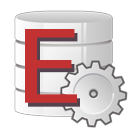
<style>
.page{position:relative;width:128px;height:128px;background:#ffffff}
.page>*{position:absolute;margin:0}
.t1{font:110px "SimHei";letter-spacing:-0.05em;color:#c33232;scale:1.18 1}
.t2{font:110px "SimHei";letter-spacing:-0.05em;scale:1.18 1}
</style>
<div class="page">
<p class="t1" style="left:25px;top:29px;width:52px;height:74px">E</p>
<p class="t2" style="left:28px;top:33px;width:52px;height:74px">E</p>
</div>
